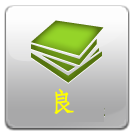
<style>
.page{position:relative;width:135px;height:135px}
.page>*{position:absolute;margin:0}
.t1{font:26px "STFangsong";letter-spacing:0.1em;color:#ffff00;font-weight:bold}
</style>
<div class="page">
<p class="t1" style="left:54px;top:88px;width:20px;height:26px">良</p>
</div>
